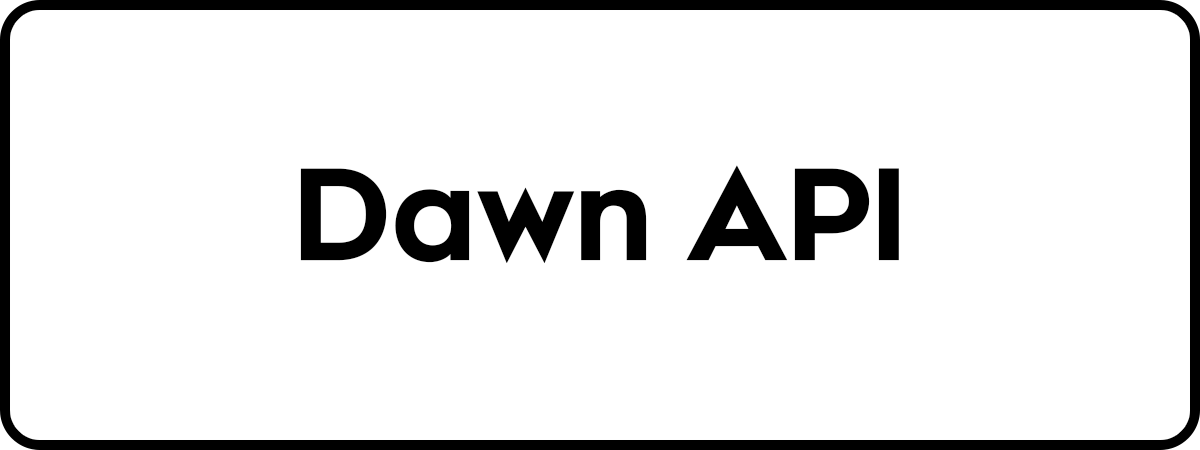
<style>
.page{position:relative;width:1200px;height:450px;background:#ffffff}
.page>*{position:absolute;margin:0}
.t1{font:125px "Renogare-Regular";letter-spacing:-0.05em;color:#000000;font-weight:bold}
</style>
<div class="page">
<p class="t1" style="left:300px;top:165px;width:599px;height:99px">Dawn API</p>
</div>
